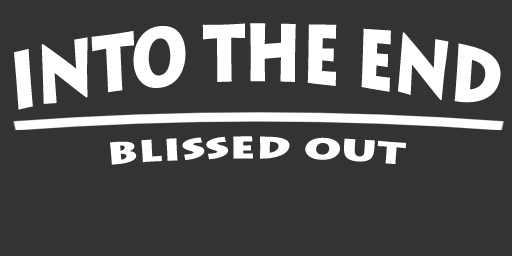
<style>
.page{position:relative;width:512px;height:256px;background:#333333}
.page>*{position:absolute;margin:0}
.t1{font:84.2px "LithosPro-Black";color:#ffffff;scale:0.68 1}
.t2{font:36px "LithosPro-Black";color:#ffffff;scale:1.2 1}
</style>
<div class="page">
<p class="t1" style="left:14px;top:23px;width:487px;height:87px">INTO THE END</p>
<p class="t2" style="left:110px;top:136px;width:296px;height:29px">blissed out</p>
</div>
